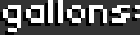
<style>
.page{position:relative;width:140px;height:35px;background:#333333}
.page>*{position:absolute;margin:0}
.t1{font:36.5px "04b03";color:#ffffff}
</style>
<div class="page">
<p class="t1" style="left:3px;top:0px;width:137px;height:32px">gallons:</p>
</div>
